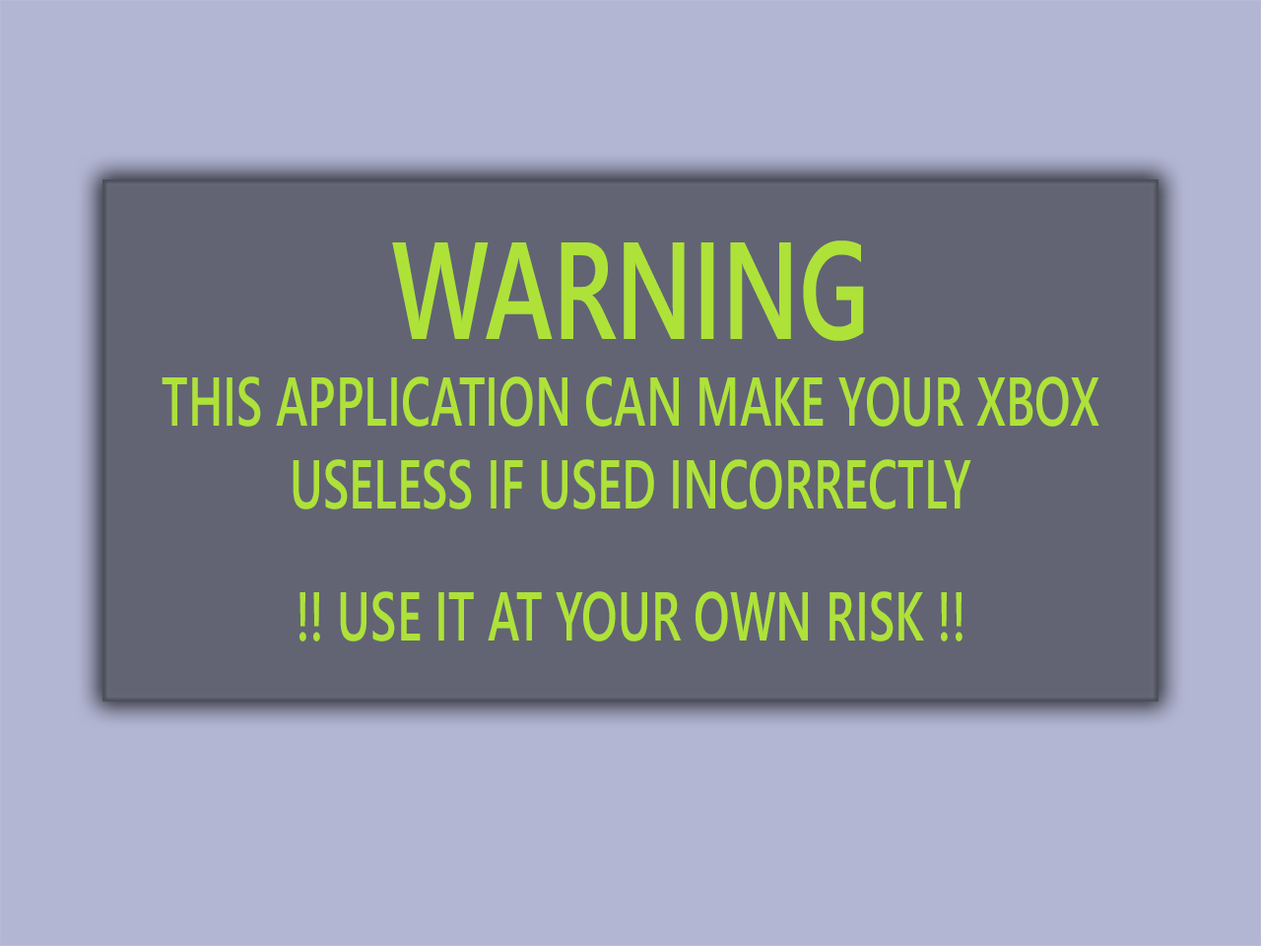
<style>
.page{position:relative;width:1261px;height:946px;background:#b2b6d3}
.page>*{position:absolute;margin:0}
.t1{font:137.9px "SegoeUI-Semibold";color:#aee239;scale:0.73 1}
.t2{font:69px/41.4px "SegoeUI-Semibold";color:#aee239;scale:0.69 1}
.t3{font:69px/7.9px "SegoeUI-Semibold";color:#aee239;scale:0.69 1}
</style>
<div class="page">
<p class="t1" style="left:392px;top:240px;width:472px;height:101px">WARNING</p>
<p class="t2" style="left:162px;top:376px;width:937px;height:265px;text-align:center">THIS APPLICATION CAN MAKE YOUR XBOX<br><br>USELESS IF USED INCORRECTLY<br><br><br><br><span class="t3">!! USE IT AT YOUR OWN RISK !!</span></p>
</div>
